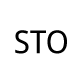
<style>
.page{position:relative;width:80px;height:80px;background:#ffffff}
.page>*{position:absolute;margin:0}
.t1{font:31.8px "DroidSans";color:#000000}
</style>
<div class="page">
<p class="t1" style="left:15px;top:30px;width:52px;height:24px">STO</p>
</div>
